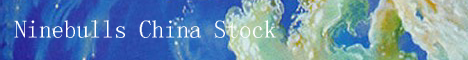
<style>
.page{position:relative;width:468px;height:60px}
.page>*{position:absolute;margin:0}
.t1{font:25px "Á¥Êé-Regular";color:#ffffff}
</style>
<div class="page">
<p class="t1" style="left:14px;top:20px;width:262px;height:18px">Ninebulls China Stock</p>
</div>
